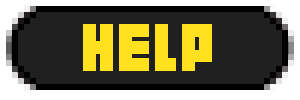
<style>
.page{position:relative;width:300px;height:100px;background:#202020}
.page>*{position:absolute;margin:0}
.t1{font:60px "04b19";letter-spacing:0.025em;color:#ffe21d}
</style>
<div class="page">
<p class="t1" style="left:83px;top:24px;width:129px;height:47px">HELP</p>
</div>
